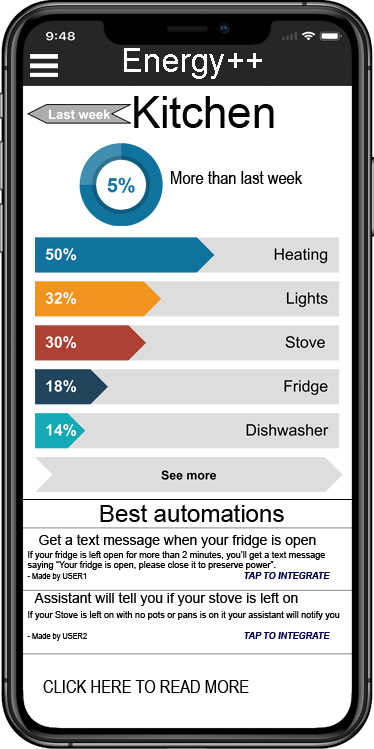
<style>
.page{position:relative;width:374px;height:749px;background:#ffffff}
.page>*{position:absolute;margin:0}
.t1{font:33.1px "ArialMT";color:#ffffff}
.t2{font:43.6px "ArialMT";color:#010101}
.t3{font:18px "ArialNarrow";color:#000000}
.t4{font:24px "ArialMT";color:#010101}
.t5{font:14px "ArialMT";color:#010101}
.t6{font:9px "ArialMT";color:#000000}
.t7{font:9px "ArialNarrow";color:#000000}
.t8{font:9px "Arial-BoldItalicMT";color:#00004f}
</style>
<div class="page">
<p class="t1" style="left:124px;top:48px;width:138px;height:31px">Energy++</p>
<p class="t2" style="left:134px;top:96px;width:140px;height:32px">Kitchen</p>
<p class="t3" style="left:171px;top:171px;width:132px;height:13px">More than last week</p>
<p class="t4" style="left:100px;top:504px;width:184px;height:18px">Best automations</p>
<p class="t5" style="left:39px;top:534px;width:277px;height:14px">Get a text message when your fridge is open</p>
<p class="t6" style="left:27px;top:551px;width:303px;height:30px">If your fridge is left open for more than 2 minutes, you’ll get a text message saying “Your fridge is open, please close it to preserve power”.<br><span class="t7">- Made by USER1     </span><span class="t8">TAP TO INTEGRATE</span></p>
<p class="t5" style="left:34px;top:592px;width:264px;height:14px">Assistant will tell you if your stove is left on</p>
<p class="t6" style="left:27px;top:611px;width:313px;height:30px">If your Stove is left on with no pots or pans is on it your assistant will notify you<br><br><span class="t7">- Made by USER2     </span><span class="t8">TAP TO INTEGRATE</span></p>
<p class="t3" style="left:43px;top:680px;width:206px;height:13px">CLICK HERE TO READ MORE</p>
</div>
